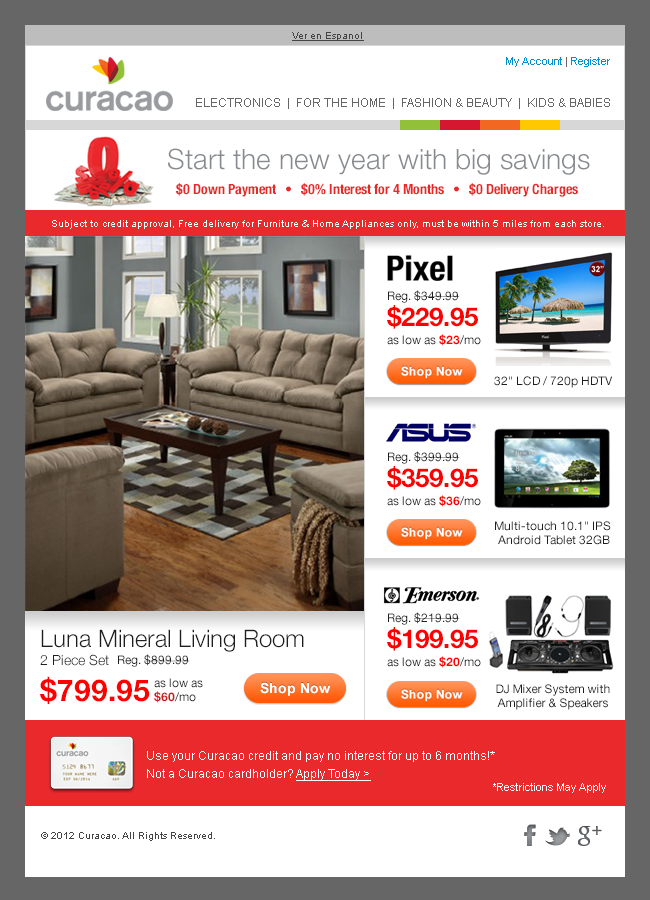
<style>
.page{position:relative;width:650px;height:900px;background:#ffffff}
.page>*{position:absolute;margin:0}
.t1{font:10px "ArialMT";color:#444444;text-decoration:underline}
.t2{font:11px "ArialMT";color:#008ecf}
.t3{font:11px "ArialMT";color:#666666}
.t4{font:12px "ArialMT";color:#666666}
.t5{font:28px "HelveticaNeue-Light";color:#878a8e}
.t6{font:14px "HelveticaNeue-BoldCond";color:#ea282c}
.t7{font:10px "ArialMT";color:#ffffff}
.t8{font:12px/18px "HelveticaNeue-Roman";color:#1e1e1e}
.t9{font:26px/26px "HelveticaNeue-Bold";color:#ff0000}
.t10{font:12px/18px "HelveticaNeue-Bold";color:#ff0000}
.t11{font:12px "HelveticaNeue-Roman";color:#1e1e1e}
.t12{font:12px/14px "HelveticaNeue-Roman";color:#1e1e1e}
.t13{font:24px/18px "HelveticaNeue-Light";color:#1e1e1e}
.t14{font:14px/18px "HelveticaNeue-Light";color:#1e1e1e}
.t15{font:30px/36px "HelveticaNeue-Bold";color:#ff0000}
.t16{font:12px/14px "HelveticaNeue-Bold";color:#ce181e}
.t17{font:12px/18px "ArialMT";color:#ffffff}
.t18{font:12px/18px "ArialMT";color:#ffffff;text-decoration:underline}
.t19{font:11px "ArialMT";color:#ffffff}
.t20{font:10px "ArialMT";color:#444444}
</style>
<div class="page">
<p class="t1" style="left:292px;top:32px;width:72px;height:9px">Ver en Espanol</p>
<p class="t2" style="left:506px;top:57px;width:104px;height:10px">My Account<span class="t3"> | </span>Register</p>
<p class="t4" style="left:196px;top:98px;width:414px;height:11px">ELECTRONICS  |  FOR THE HOME  |  FASHION &amp; BEAUTY  |  KIDS &amp; BABIES</p>
<p class="t5" style="left:168px;top:148px;width:422px;height:27px">Start the new year with big savings</p>
<p class="t6" style="left:176px;top:183px;width:402px;height:14px">$0 Down Payment   •   $0% Interest for 4 Months   •   $0 Delivery Charges</p>
<p class="t7" style="left:52px;top:220px;width:552px;height:9px">Subject to credit approval, Free delivery for Furniture &amp; Home Appliances only, must be within 5 miles from each store.</p>
<p class="t8" style="left:387px;top:290px;width:94px;height:56px">Reg. $349.99<br><span class="t9">$229.95<br></span>as low as <span class="t10">$23</span>/mo</p>
<p class="t11" style="left:494px;top:376px;width:119px;height:12px">32" LCD / 720p HDTV</p>
<p class="t8" style="left:387px;top:451px;width:94px;height:56px">Reg. $399.99<br><span class="t9">$359.95<br></span>as low as <span class="t10">$36</span>/mo</p>
<p class="t12" style="left:495px;top:521px;width:116px;height:24px;text-align:center">Multi-touch 10.1" IPS <br>Android Tablet 32GB</p>
<p class="t8" style="left:387px;top:612px;width:94px;height:56px">Reg. $219.99<br><span class="t9">$199.95<br></span>as low as <span class="t10">$20</span>/mo</p>
<p class="t13" style="left:40px;top:629px;width:264px;height:75px">Luna Mineral Living Room<br><span class="t14">2 Piece Set<br></span><span class="t15">$799.95</span></p>
<p class="t11" style="left:118px;top:654px;width:72px;height:13px">Reg. $899.99</p>
<p class="t12" style="left:154px;top:678px;width:49px;height:25px">as low as<br><span class="t16">$60</span>/mo</p>
<p class="t12" style="left:496px;top:684px;width:114px;height:26px;text-align:center">DJ Mixer System with<br>Amplifier &amp; Speakers</p>
<p class="t17" style="left:147px;top:751px;width:348px;height:30px">Use your Curacao credit and pay no interest for up to 6 months!*<br>Not a Curacao cardholder? <span class="t18">Apply Today &gt;</span></p>
<p class="t19" style="left:493px;top:783px;width:113px;height:10px">*Restrictions May Apply</p>
<p class="t20" style="left:41px;top:832px;width:174px;height:9px">© 2012 Curacao. All Rights Reserved.</p>
</div>
